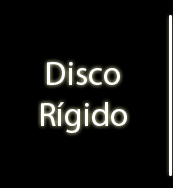
<style>
.page{position:relative;width:173px;height:188px;background:#000000}
.page>*{position:absolute;margin:0}
.t1{font:12px "MyriadPro-Regular";color:#ffffff}
</style>
<div class="page">
<p class="t1" style="left:41px;top:62px;width:86px;height:71px;text-align:center">Disco Rígido</p>
</div>
